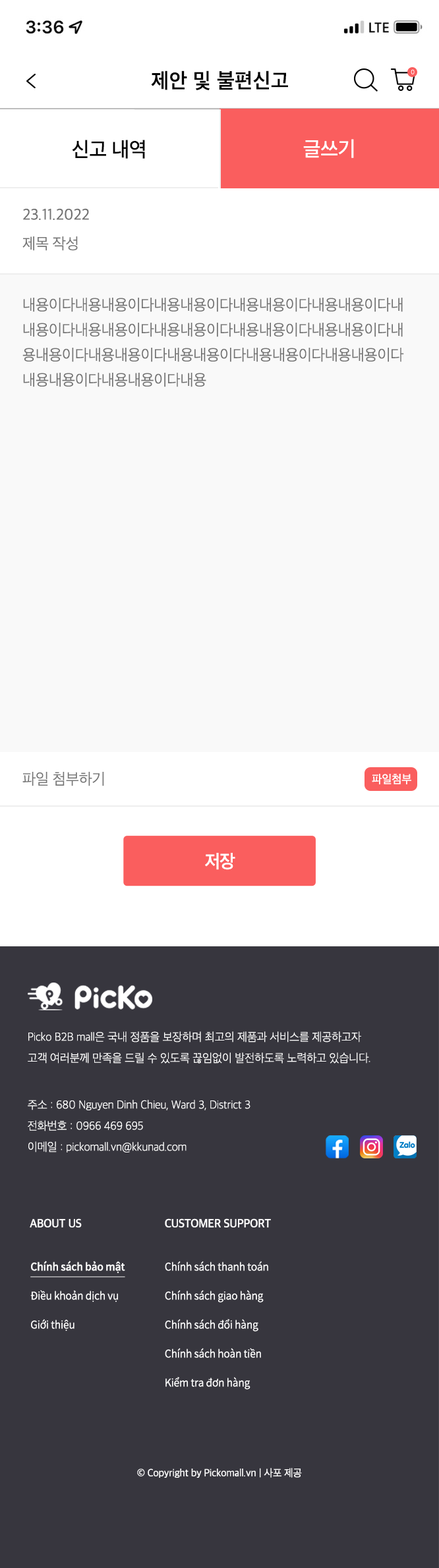
<style>
.page{position:relative;width:439px;height:1568px;background:#37363e}
.page>*{position:absolute;margin:0}
.t1{font:21.1px "AppleSDGothicNeo-SemiBold";letter-spacing:0.017em;color:#000000}
.t2{font:6.4px "AppleSDGothicNeo-UltraLight";letter-spacing:-0.01em;color:#ffffff}
.t3{font:21.1px "AppleSDGothicNeo-Medium";letter-spacing:-0.01em;color:#000000;scale:0.97 1}
.t4{font:21.1px "AppleSDGothicNeo-Medium";letter-spacing:-0.01em;color:#ffffff;scale:0.97 1}
.t5{font:15.8px "AppleSDGothicNeo-Regular";letter-spacing:-0.01em;color:#727272}
.t6{font:15.8px "AppleSDGothicNeo-Light";letter-spacing:-0.01em;color:#757575}
.t7{font:15.8px/25px "AppleSDGothicNeo-Light";letter-spacing:-0.01em;color:#727272}
.t8{font:11.9px "AppleSDGothicNeo-Medium";letter-spacing:-0.01em;color:#ffffff}
.t9{font:18.4px "AppleSDGothicNeo-SemiBold";letter-spacing:-0.022em;color:#ffffff;scale:0.96 1}
.t10{font:11.9px/21.1px "AppleSDGothicNeo-UltraLight";letter-spacing:-0.01em;color:#ffffff;scale:0.97 1}
.t11{font:11.9px "AppleSDGothicNeo-SemiBold";letter-spacing:-0.01em;color:#ffffff;scale:0.97 1}
.t12{font:11.9px "AppleSDGothicNeo-SemiBold";letter-spacing:-0.01em;color:#ffffff;text-transform:uppercase;scale:0.97 1}
.t13{font:10.5px/29px "NotoSansCJKkr-DemiLight";letter-spacing:-0.01em;color:#ffffff;scale:0.97 1}
.t14{font:10.5px/29px "NotoSansCJKkr-Medium";letter-spacing:-0.01em;color:#ffffff;text-decoration:underline;scale:0.97 1}
.t15{font:10.5px "AppleSDGothicNeo-Regular";letter-spacing:-0.01em;color:#ffffff;scale:0.97 1}
</style>
<div class="page">
<p class="t1" style="left:151px;top:70px;width:137px;height:20px">제안 및 불편신고</p>
<p class="t2" style="left:410px;top:69px;width:4px;height:5px">0</p>
<p class="t3" style="left:72px;top:140px;width:73px;height:19px">신고 내역</p>
<p class="t4" style="left:303px;top:139px;width:51px;height:19px">글쓰기</p>
<p class="t5" style="left:23px;top:208px;width:66px;height:12px">23.11.2022</p>
<p class="t6" style="left:22px;top:236px;width:56px;height:15px">제목 작성</p>
<p class="t7" style="left:22px;top:298px;width:382px;height:89px">내용이다내용내용이다내용내용이다내용내용이다내용내용이다내<br>내용이다내용내용이다내용내용이다내용내용이다내용내용이다내<br>용내용이다내용내용이다내용내용이다내용내용이다내용내용이다<br>내용내용이다내용내용이다내용</p>
<p class="t6" style="left:22px;top:772px;width:82px;height:14px">파일 첨부하기</p>
<p class="t8" style="left:371px;top:774px;width:40px;height:10px">파일첨부</p>
<p class="t9" style="left:205px;top:853px;width:30px;height:17px">저장</p>
<p class="t10" style="left:28px;top:1031px;width:342px;height:33px">Picko B2B mall은 국내 정품을 보장하며 최고의 제품과 서비스를 제공하고자<br>고객 여러분께 만족을 드릴 수 있도록 끊임없이 발전하도록 노력하고 있습니다.</p>
<p class="t10" style="left:28px;top:1100px;width:222px;height:52px">주소 : 680 Nguyen Dinh Chieu, Ward 3, District 3<br>전화번호 : 0966 469 695<br>이메일 : pickomall.vn@kkunad.com</p>
<p class="t11" style="left:30px;top:1218px;width:52px;height:10px">ABOUT US</p>
<p class="t12" style="left:165px;top:1218px;width:106px;height:10px">Customer Support</p>
<p class="t13" style="left:30px;top:1260px;width:95px;height:71px"><span class="t14">Chính sách bảo mật<br></span>Điều khoản dịch vụ<br>Giới thiệu</p>
<p class="t13" style="left:165px;top:1261px;width:103px;height:129px">Chính sách thanh toán<br>Chính sách giao hàng<br>Chính sách đổi hàng<br>Chính sách hoàn tiền<br>Kiểm tra đơn hàng</p>
<p class="t15" style="left:137px;top:1468px;width:165px;height:10px">© Copyright by Pickomall.vn | 사포 제공</p>
</div>
